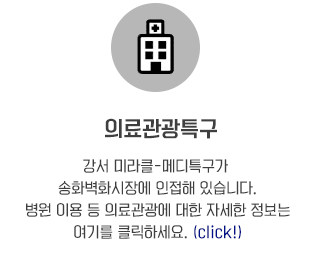
<style>
.page{position:relative;width:310px;height:270px;background:#ffffff}
.page>*{position:absolute;margin:0}
.t1{font:20px "KoreanYNSJG4-R";color:#3f3f3f}
.t2{font:14px/22px "KoreanYNSJG3-R";color:#3f3f3f}
.t3{font:14px/22px "KoreanYNSJG3-R";color:#001086}
</style>
<div class="page">
<p class="t1" style="left:105px;top:118px;width:112px;height:21px">의료관광특구</p>
<p class="t2" style="left:26px;top:159px;width:264px;height:80px;text-align:center">강서 미라클-메디특구가 <br>송화벽화시장에 인접해 있습니다.<br>병원 이용 등 의료관광에 대한 자세한 정보는<br>여기를 클릭하세요. <span class="t3">(click!)</span></p>
</div>
